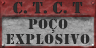
<style>
.page{position:relative;width:96px;height:48px}
.page>*{position:absolute;margin:0}
.t1{font:16.7px "Army";color:#303030;text-transform:uppercase}
.t2{font:14.7px/14.7px "Army";letter-spacing:0.04em;color:#2b2b2b;text-transform:uppercase;scale:1.04 1}
</style>
<div class="page">
<p class="t1" style="left:13px;top:1px;width:70px;height:13px">c. t. c. t</p>
<p class="t2" style="left:6px;top:19px;width:84px;height:25px;text-align:center">POÇO<br>EXPLOSIVO</p>
</div>
